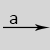
<style>
.page{position:relative;width:50px;height:50px;background:#d6d6d6}
.page>*{position:absolute;margin:0}
.t1{font:20px "Calibri";color:#000000}
</style>
<div class="page">
<p class="t1" style="left:9px;top:15px;width:9px;height:9px">a</p>
</div>
